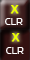
<style>
.page{position:relative;width:30px;height:60px}
.page>*{position:absolute;margin:0}
.t1{font:13.3px "SimianText-Orangutan";color:#eaff02;font-weight:bold}
.t2{font:10.7px "SimianText-Orangutan";color:#ffffff}
</style>
<div class="page">
<p class="t1" style="left:10px;top:5px;width:9px;height:9px">X</p>
<p class="t2" style="left:5px;top:18px;width:18px;height:7px">CLR</p>
<p class="t1" style="left:11px;top:33px;width:9px;height:9px">X</p>
<p class="t2" style="left:6px;top:47px;width:18px;height:7px">CLR</p>
</div>
